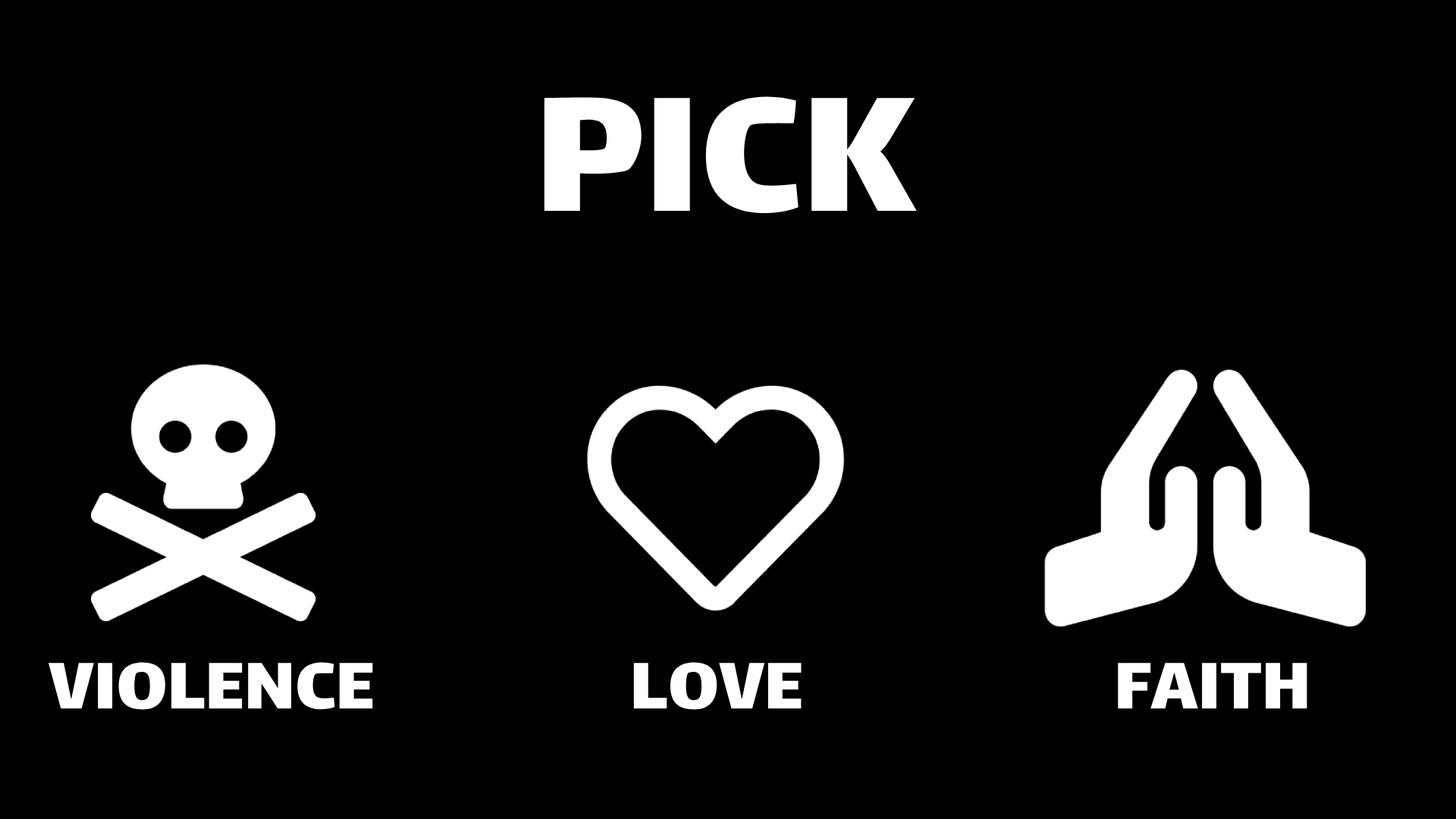
<style>
.page{position:relative;width:1456px;height:819px;background:#000000}
.page>*{position:absolute;margin:0}
.t1{font:197.9px "Lalezar-Regular";color:#ffffff}
.t2{font:79.6px "Lalezar-Regular";color:#ffffff}
</style>
<div class="page">
<p class="t1" style="left:544px;top:96px;width:373px;height:117px">PICK</p>
<p class="t2" style="left:48px;top:662px;width:325px;height:48px">VIOLENCE</p>
<p class="t2" style="left:633px;top:662px;width:169px;height:48px">LOVE</p>
<p class="t2" style="left:1118px;top:663px;width:189px;height:46px">FAITH</p>
</div>
